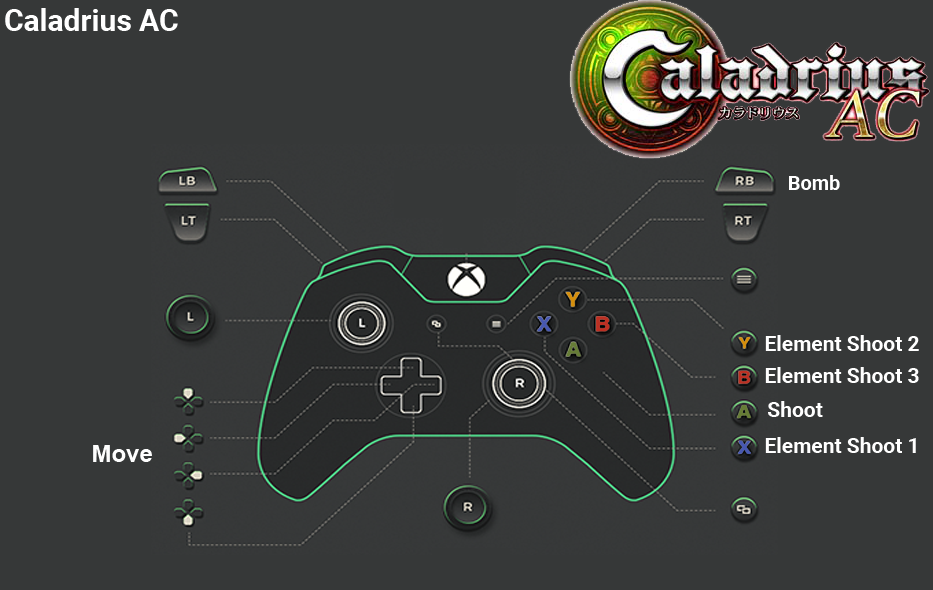
<style>
.page{position:relative;width:933px;height:590px;background:#363838}
.page>*{position:absolute;margin:0}
.t1{font:30px "Roboto-Bold";color:#ffffff}
.t2{font:20px "Roboto-Bold";color:#ffffff}
.t3{font:21px "Roboto-Bold";color:#ffffff}
.t4{font:24px "Arial-BoldMT";color:#fefefe}
</style>
<div class="page">
<p class="t1" style="left:5px;top:8px;width:173px;height:23px">Caladrius AC</p>
<p class="t2" style="left:789px;top:175px;width:51px;height:15px">Bomb</p>
<p class="t3" style="left:765px;top:335px;width:154px;height:16px">Element Shoot 2</p>
<p class="t3" style="left:765px;top:367px;width:154px;height:16px">Element Shoot 3</p>
<p class="t3" style="left:768px;top:401px;width:55px;height:16px">Shoot</p>
<p class="t3" style="left:765px;top:437px;width:151px;height:16px">Element Shoot 1</p>
<p class="t4" style="left:93px;top:445px;width:59px;height:17px">Move</p>
</div>
